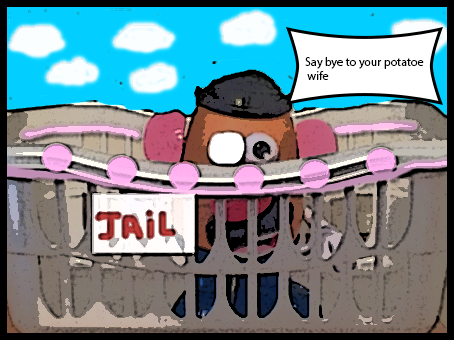
<style>
.page{position:relative;width:454px;height:340px}
.page>*{position:absolute;margin:0}
.t1{font:12px "MyriadPro-Regular";color:#000000}
</style>
<div class="page">
<p class="t1" style="left:305px;top:57px;width:119px;height:23px">Say bye to your potatoe<br> wife</p>
</div>
